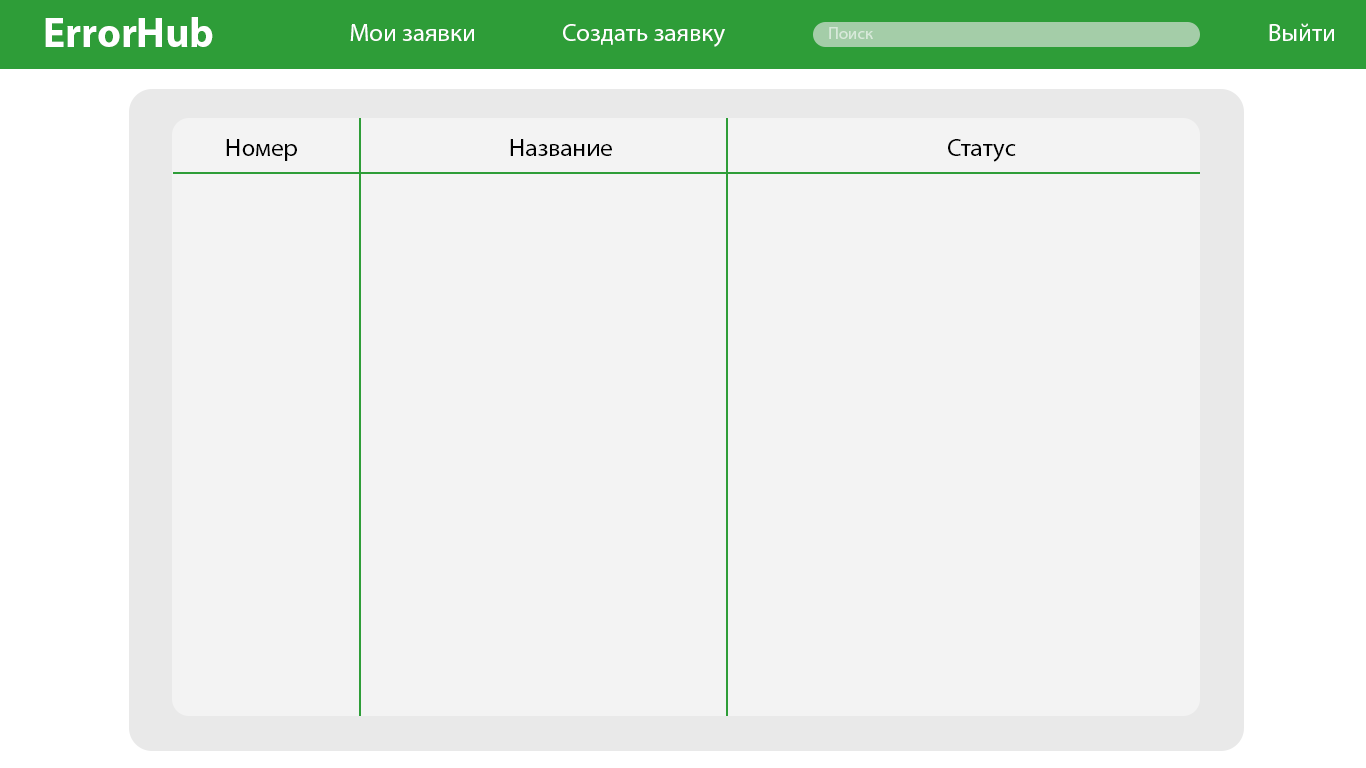
<style>
.page{position:relative;width:1366px;height:768px;background:#f3f3f3}
.page>*{position:absolute;margin:0}
.t1{font:41.7px "MyriadPro-Bold";color:#ffffff}
.t2{font:25px "MyriadPro-Regular";color:#ffffff}
.t3{font:16.7px "MyriadPro-Regular";color:#d8e9da}
.t4{font:25px "MyriadPro-Regular";color:#000000}
</style>
<div class="page">
<p class="t1" style="left:45px;top:17px;width:168px;height:30px">ErrorHub</p>
<p class="t2" style="left:350px;top:24px;width:124px;height:17px">Мои заявки</p>
<p class="t2" style="left:563px;top:24px;width:162px;height:23px">Создать заявку</p>
<p class="t3" style="left:829px;top:27px;width:44px;height:12px">Поиск</p>
<p class="t2" style="left:1269px;top:23px;width:65px;height:18px">Выйти</p>
<p class="t4" style="left:226px;top:139px;width:71px;height:22px">Номер</p>
<p class="t4" style="left:510px;top:139px;width:102px;height:17px">Название</p>
<p class="t4" style="left:948px;top:139px;width:68px;height:23px">Статус</p>
</div>
